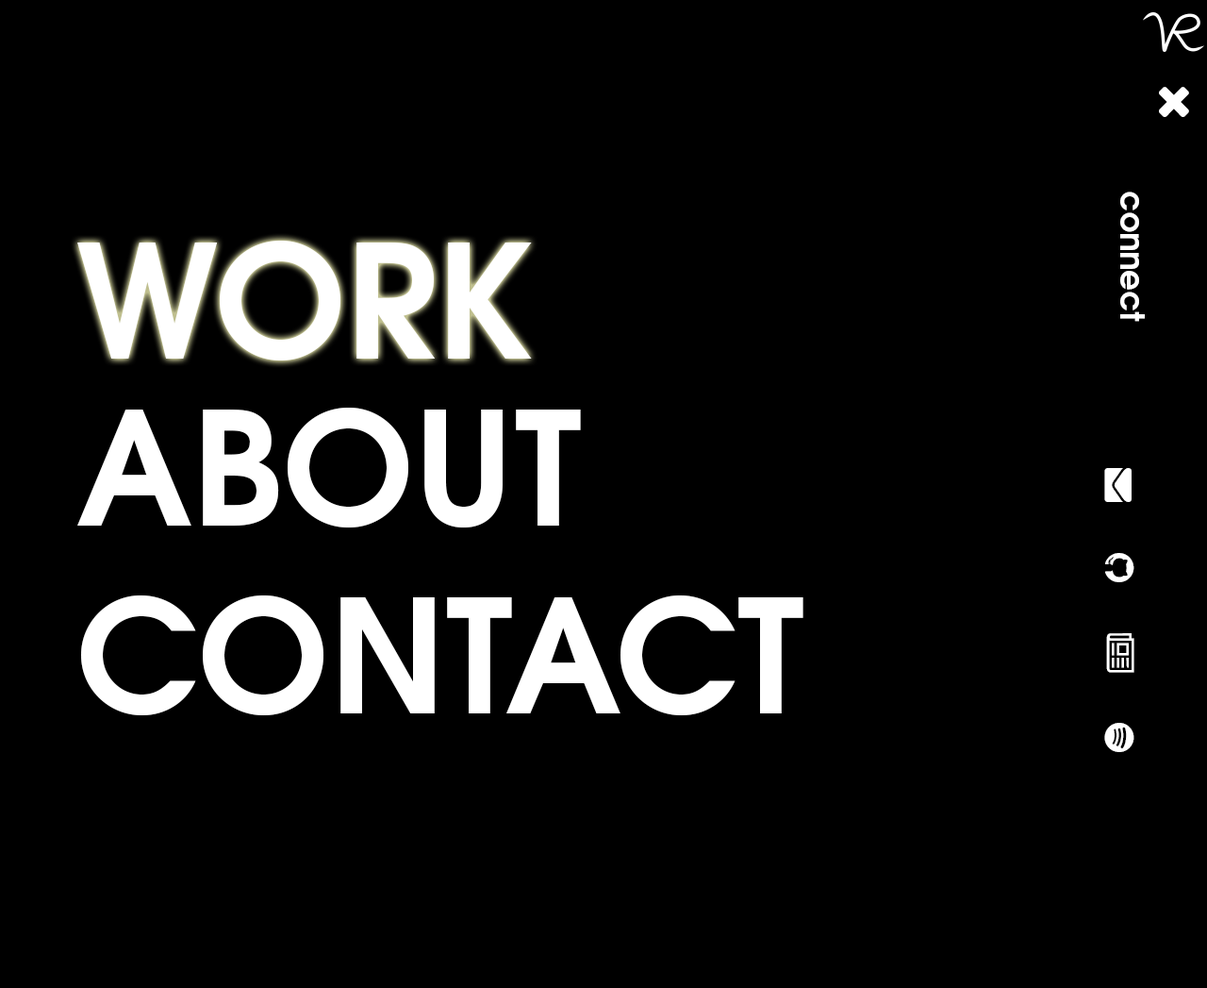
<style>
.page{position:relative;width:1207px;height:988px;background:#000000}
.page>*{position:absolute;margin:0}
.t1{font:32.2px "TeXGyreAdventor-Bold";color:#ffffff}
.t2{font:156.7px "TeXGyreAdventor-Bold";color:#ffffff}
</style>
<div class="page">
<p class="t1" style="left:1121px;top:191px;width:24px;height:131px;rotate:90deg">connect</p>
<p class="t2" style="left:77px;top:241px;width:455px;height:120px">WORK</p>
<p class="t2" style="left:77px;top:407px;width:727px;height:309px;text-align:justify">ABOUT<br>CONTACT</p>
</div>
